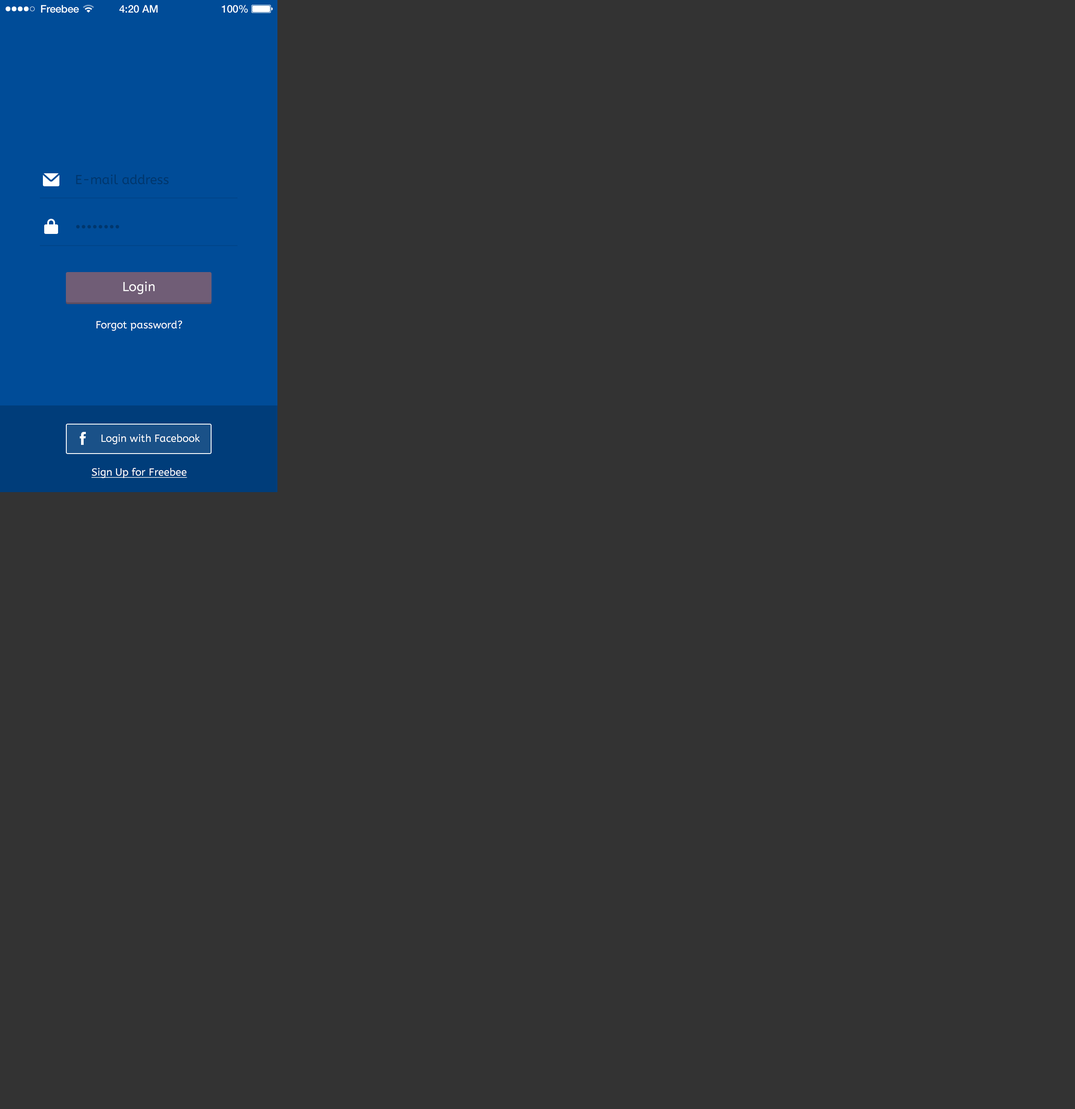
<style>
.page{position:relative;width:1075px;height:1109px;background:#333333}
.page>*{position:absolute;margin:0}
.t1{font:10.4px "HelveticaNeue-Medium";color:#ffffff}
.t2{font:13px "ABeeZee-Regular";color:#00366d}
.t3{font:13px "ABeeZee-Regular";color:#ffffff}
.t4{font:10.4px "ABeeZee-Regular";color:#ffffff}
.t5{font:10.4px "ABeeZee-Regular";color:#ffffff;text-decoration:underline}
</style>
<div class="page">
<p class="t1" style="left:41px;top:5px;width:38px;height:8px">Freebee</p>
<p class="t1" style="left:119px;top:5px;width:39px;height:8px">4:20 AM</p>
<p class="t1" style="left:221px;top:5px;width:27px;height:8px">100%</p>
<p class="t2" style="left:76px;top:174px;width:93px;height:11px">E-mail address</p>
<p class="t2" style="left:76px;top:225px;width:43px;height:4px">••••••••</p>
<p class="t3" style="left:123px;top:282px;width:32px;height:12px">Login</p>
<p class="t4" style="left:96px;top:321px;width:86px;height:10px">Forgot password?</p>
<p class="t4" style="left:101px;top:434px;width:99px;height:11px">Login with Facebook</p>
<p class="t5" style="left:91px;top:468px;width:96px;height:10px">Sign Up for Freebee</p>
</div>
